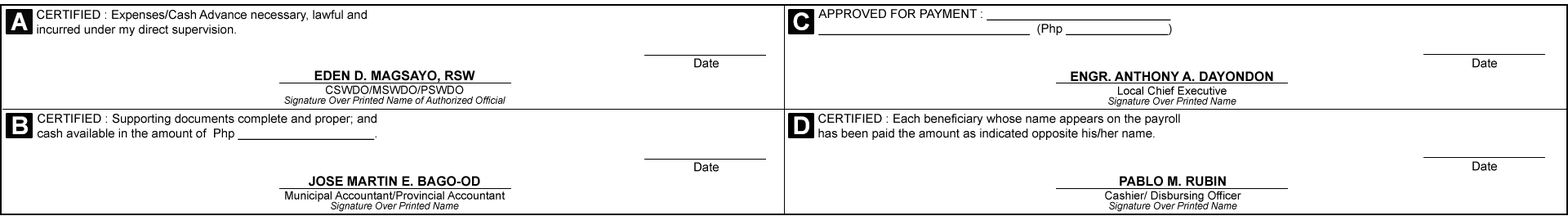
<style>
.page{position:relative;width:1568px;height:216px;background:#ffffff}
.page>*{position:absolute;margin:0}
.t1{font:24.5px "Arial-BoldMT";color:#ffffff}
.t2{font:12.3px "ArialMT";color:#010101}
.t3{font:12.3px "ArialMT";color:#000000}
.t4{font:9.8px/9.8px "Arial-ItalicMT";color:#000000}
.t5{font:13.1px "Arial-BoldMT";color:#000000}
.t6{font:11.4px "ArialMT";color:#000000}
.t7{font:24.5px "Arial-BoldMT";color:#fefefe}
</style>
<div class="page">
<p class="t1" style="left:11px;top:12px;width:17px;height:18px">A</p>
<p class="t2" style="left:37px;top:10px;width:330px;height:26px">CERTIFIED : Expenses/Cash Advance necessary, lawful and <br>incurred under my direct supervision.</p>
<p class="t1" style="left:793px;top:12px;width:16px;height:18px">C</p>
<p class="t2" style="left:818px;top:9px;width:354px;height:26px">APPROVED FOR PAYMENT : ___________________________<br>_______________________________  (Php _______________)</p>
<p class="t3" style="left:694px;top:58px;width:25px;height:10px">Date</p>
<p class="t3" style="left:1472px;top:58px;width:25px;height:10px">Date</p>
<p class="t4" style="left:284px;top:70px;width:222px;height:36px;text-align:center"><span class="t5">EDEN D. MAGSAYO, RSW<br></span><span class="t6">CSWDO/MSWDO/PSWDO<br></span>Signature Over Printed Name of Authorized Official</p>
<p class="t4" style="left:1071px;top:71px;width:202px;height:36px;text-align:center"><span class="t5">ENGR. ANTHONY A. DAYONDON<br></span><span class="t6">Local Chief Executive<br></span>Signature Over Printed Name</p>
<p class="t2" style="left:38px;top:114px;width:338px;height:26px">CERTIFIED : Supporting documents complete and proper; and<br>cash available in the amount of  Php ____________________.</p>
<p class="t2" style="left:818px;top:114px;width:362px;height:26px">CERTIFIED : Each beneficiary whose name appears on the payroll<br>has been paid the amount as indicated opposite his/her name.</p>
<p class="t7" style="left:12px;top:116px;width:16px;height:18px">B</p>
<p class="t1" style="left:794px;top:116px;width:15px;height:18px">D</p>
<p class="t3" style="left:694px;top:162px;width:25px;height:10px">Date</p>
<p class="t3" style="left:1472px;top:161px;width:25px;height:10px">Date</p>
<p class="t6" style="left:285px;top:176px;width:221px;height:36px;text-align:center"><span class="t5">JOSE MARTIN E. BAGO-OD<br></span>Municipal Accountant/Provincial Accountant<br><span class="t4">Signature Over Printed Name</span></p>
<p class="t6" style="left:1105px;top:176px;width:136px;height:36px;text-align:center"><span class="t5">PABLO M. RUBIN<br></span>Cashier/ Disbursing Officer<br><span class="t4">Signature Over Printed Name</span></p>
</div>
